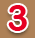
<style>
.page{position:relative;width:35px;height:38px;background:#ae8157}
.page>*{position:absolute;margin:0}
.t1{font:36px "ArialRoundedMTBold";color:#e60023}
</style>
<div class="page">
<p class="t1" style="left:8px;top:5px;width:19px;height:26px">3</p>
</div>
